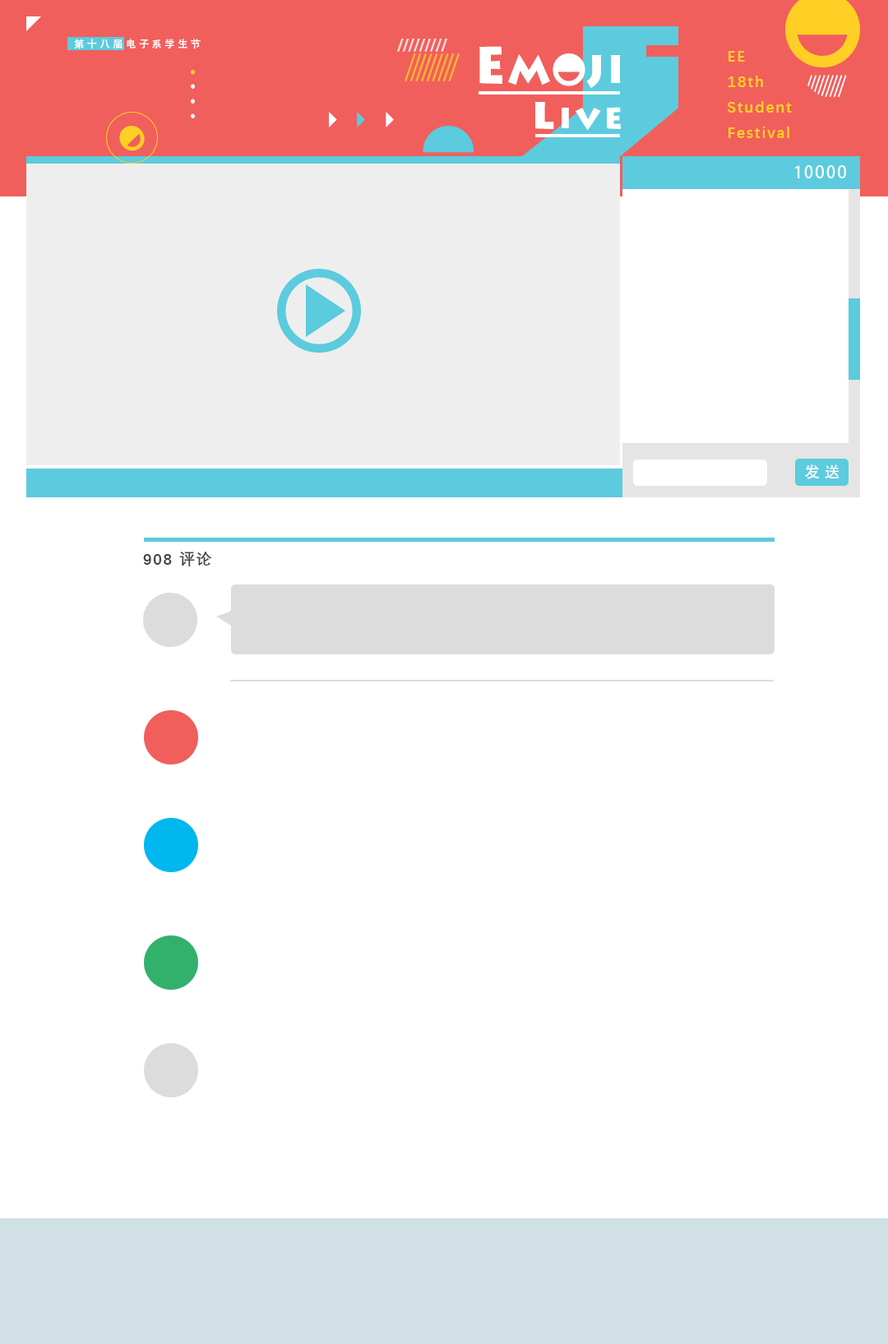
<style>
.page{position:relative;width:888px;height:1344px;background:#ffffff}
.page>*{position:absolute;margin:0}
.t1{font:10.1px "AdobeHeitiStd-Regular";letter-spacing:0.28em;color:#ffffff}
.t2{font:39.8px "LithosPro-Black";letter-spacing:0.04em;color:#ffffff}
.t3{font:51.3px "LithosPro-Black";letter-spacing:0.04em;color:#ffffff}
.t4{font:15.4px/25.4px "DengXian-Bold";letter-spacing:0.1em;color:#ffcf25}
.t5{font:33.5px "LithosPro-Black";letter-spacing:0.1em;color:#ffffff}
.t6{font:43.8px "LithosPro-Black";letter-spacing:0.1em;color:#ffffff}
.t7{font:16.6px "AdobeHeitiStd-Regular";letter-spacing:0.1em;color:#ffffff}
.t8{font:15.4px "AdobeHeitiStd-Regular";letter-spacing:0.28em;color:#ffffff}
.t9{font:15.4px "DengXian-Bold";letter-spacing:0.1em;color:#454545}
</style>
<div class="page">
<p class="t1" style="left:74px;top:39px;width:127px;height:10px">第十八届电子系学生节</p>
<p class="t2" style="left:479px;top:46px;width:141px;height:42px"><span class="t3">E</span>M   JI</p>
<p class="t4" style="left:727px;top:51px;width:64px;height:87px">EE<br>18th<br>Student<br>Festival</p>
<p class="t5" style="left:534px;top:102px;width:86px;height:28px"><span class="t6">l</span>ive</p>
<p class="t7" style="left:795px;top:165px;width:51px;height:13px">10000</p>
<p class="t8" style="left:805px;top:464px;width:34px;height:15px">发送</p>
<p class="t9" style="left:143px;top:551px;width:69px;height:15px">908 评论</p>
</div>
